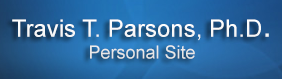
<style>
.page{position:relative;width:282px;height:79px}
.page>*{position:absolute;margin:0}
.t1{font:24px "ArialMT";color:#fefefe}
.t2{font:36px "ArialMT";color:#fefefe}
.t3{font:18px "ArialMT";color:#fefefe}
</style>
<div class="page">
<p class="t1" style="left:12px;top:19px;width:257px;height:40px;text-align:center">Travis T. Parsons, Ph.D<span class="t2">.<br></span><span class="t3">Personal Site</span></p>
</div>
